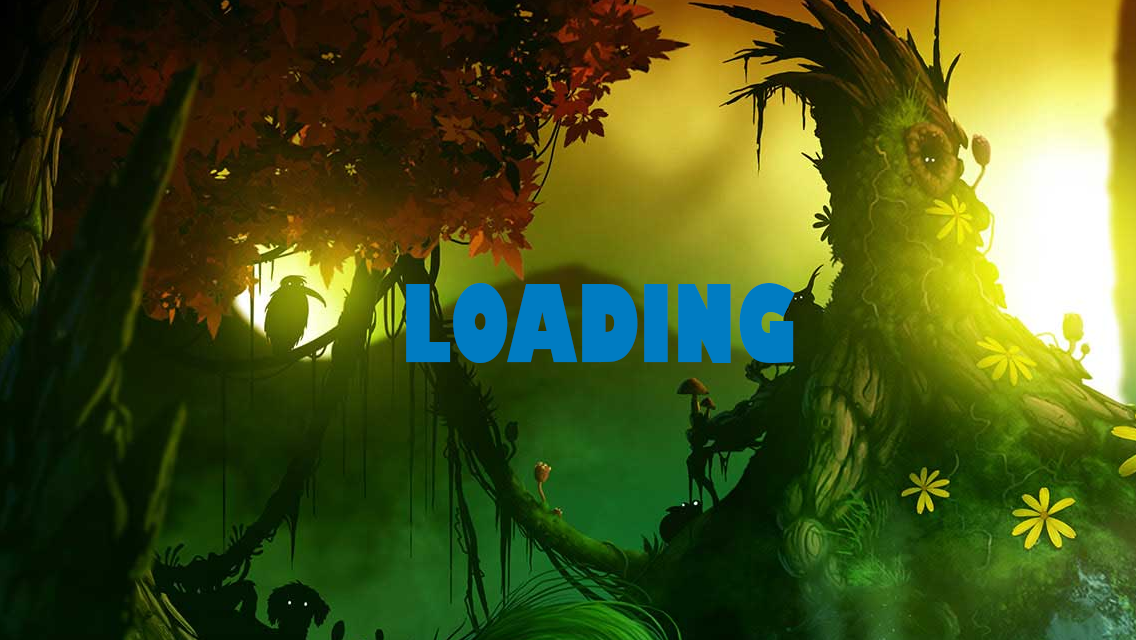
<style>
.page{position:relative;width:1136px;height:640px}
.page>*{position:absolute;margin:0}
.t1{font:104px "GillSans-UltraBoldCondensed";color:#007cc2}
</style>
<div class="page">
<p class="t1" style="left:406px;top:283px;width:389px;height:80px">LOADING</p>
</div>
